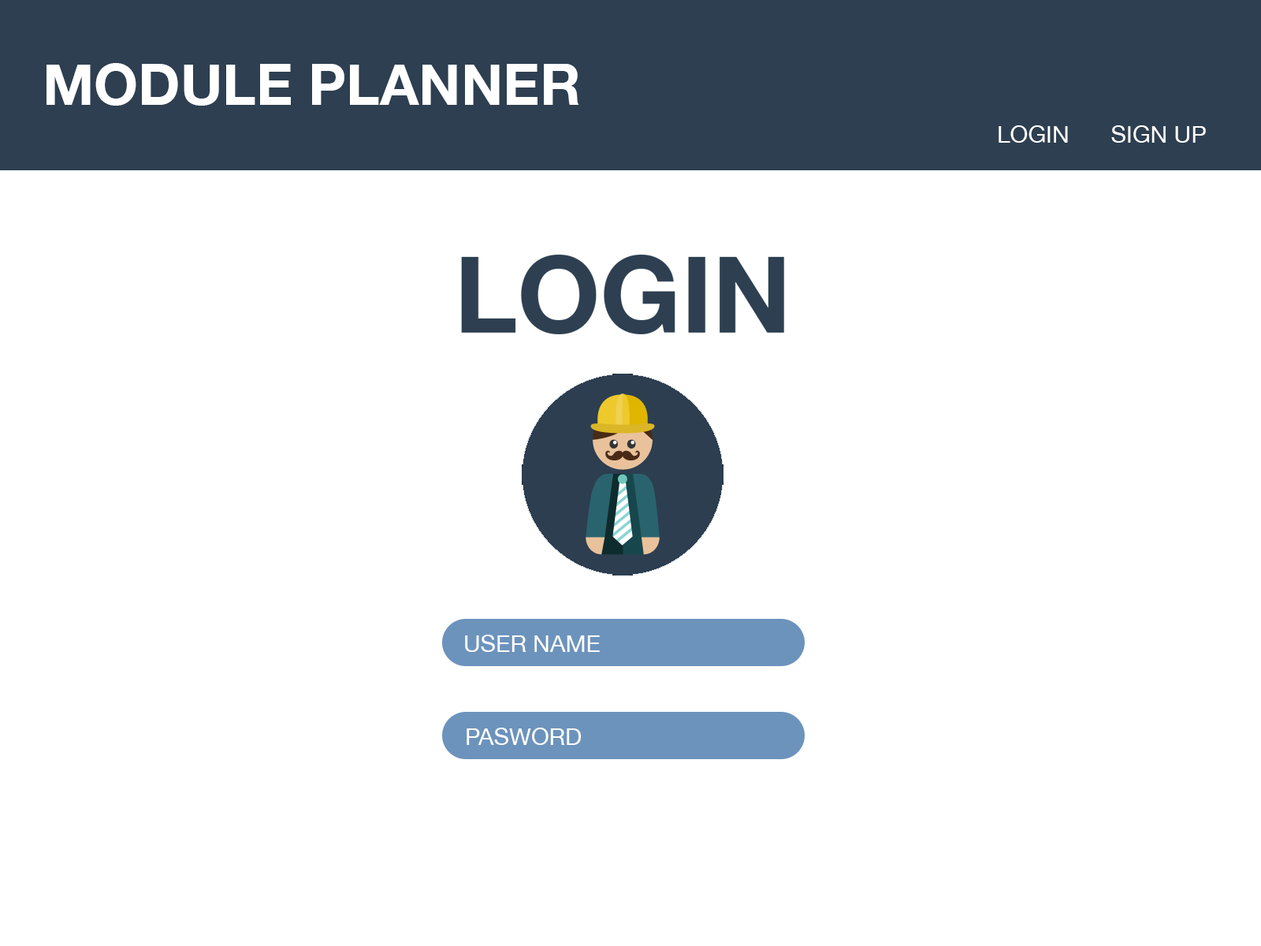
<style>
.page{position:relative;width:1261px;height:946px;background:#ffffff}
.page>*{position:absolute;margin:0}
.t1{font:56.7px "HelveticaNeue-Bold";color:#ffffff}
.t2{font:23.6px "HelveticaNeue";color:#ffffff}
</style>
<div class="page">
<p class="t1" style="left:46px;top:63px;width:533px;height:43px">MODULE PLANNER</p>
<p class="t2" style="left:998px;top:125px;width:70px;height:18px">LOGIN</p>
<p class="t2" style="left:1111px;top:125px;width:95px;height:18px">SIGN UP</p>
<p class="t2" style="left:465px;top:634px;width:135px;height:18px">USER NAME</p>
<p class="t2" style="left:467px;top:727px;width:114px;height:18px">PASWORD</p>
</div>
